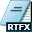
<style>
.page{position:relative;width:32px;height:32px}
.page>*{position:absolute;margin:0}
.t1{font:9px "Ubuntu-Bold";color:#ffffff}
</style>
<div class="page">
<p class="t1" style="left:8px;top:24px;width:22px;height:6px">RTFX</p>
</div>
